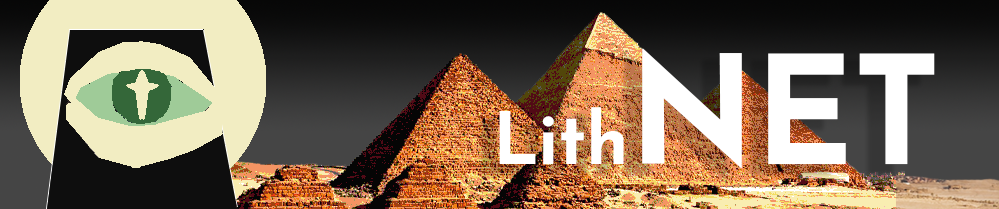
<style>
.page{position:relative;width:999px;height:209px}
.page>*{position:absolute;margin:0}
.t1{font:72px "JosefinSans-Bold";letter-spacing:-0.01em;color:#ffffff}
.t2{font:150px "JosefinSans-Bold";letter-spacing:-0.01em;color:#ffffff}
</style>
<div class="page">
<p class="t1" style="left:499px;top:48px;width:436px;height:120px">Lith<span class="t2">NET</span></p>
</div>
